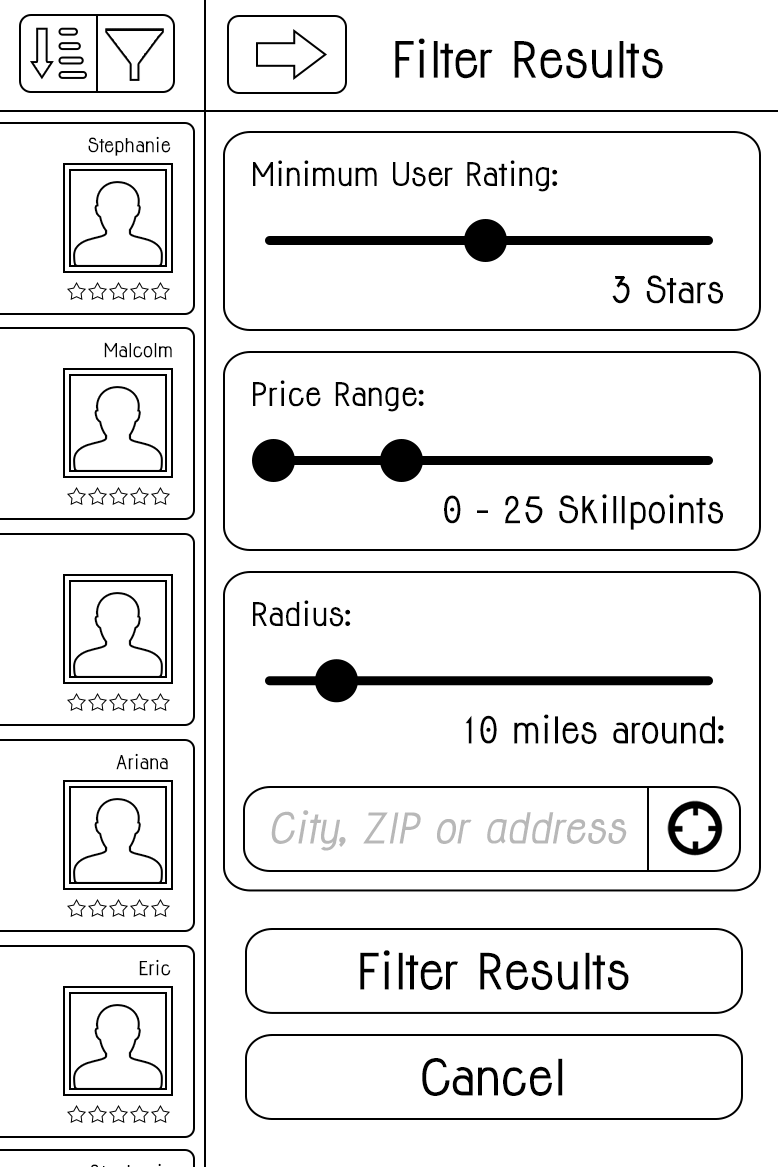
<style>
.page{position:relative;width:778px;height:1167px;background:#ffffff}
.page>*{position:absolute;margin:0}
.t1{font:46.1px "Jolly-Bold";color:#000000}
.t2{font:18px "Jolly-Bold";color:#000000}
.t3{font:30px "Jolly-Bold";color:#000000}
.t4{font:34px "Jolly-Bold";color:#000000}
.t5{font:30.1px "Jolly-Bold";color:#000000}
.t6{font:34.1px "Jolly-Bold";color:#000000}
.t7{font:39.1px "Jolly-BoldItalic";color:#b8b8b8}
.t8{font:46px "Jolly-Bold";color:#000000}
</style>
<div class="page">
<p class="t1" style="left:395px;top:38px;width:268px;height:41px">Filter Results</p>
<p class="t2" style="left:88px;top:136px;width:83px;height:20px">Stephanie</p>
<p class="t3" style="left:253px;top:160px;width:305px;height:32px">Minimum User Rating:</p>
<p class="t4" style="left:612px;top:275px;width:111px;height:29px">3 Stars</p>
<p class="t2" style="left:104px;top:342px;width:68px;height:16px">Malcolm</p>
<p class="t3" style="left:253px;top:380px;width:171px;height:32px">Price Range:</p>
<p class="t4" style="left:444px;top:494px;width:279px;height:36px">0 - 25 Skillpoints</p>
<p class="t5" style="left:253px;top:600px;width:98px;height:27px">Radius:</p>
<p class="t6" style="left:465px;top:714px;width:259px;height:30px">10 miles around:</p>
<p class="t2" style="left:116px;top:753px;width:52px;height:17px">Ariana</p>
<p class="t7" style="left:271px;top:810px;width:356px;height:41px">City, ZIP or address</p>
<p class="t8" style="left:360px;top:950px;width:269px;height:41px">Filter Results</p>
<p class="t2" style="left:139px;top:959px;width:32px;height:17px">Eric</p>
<p class="t8" style="left:422px;top:1058px;width:141px;height:38px">Cancel</p>
</div>
